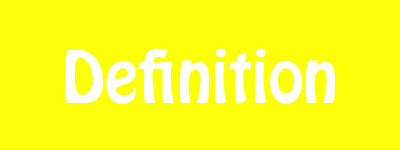
<style>
.page{position:relative;width:400px;height:150px;background:#fcff08}
.page>*{position:absolute;margin:0}
.t1{font:63.7px "HoboStd";color:#ffffff}
</style>
<div class="page">
<p class="t1" style="left:65px;top:48px;width:270px;height:56px">Definition</p>
</div>
